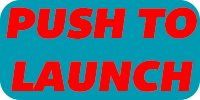
<style>
.page{position:relative;width:200px;height:100px;background:#009bb2}
.page>*{position:absolute;margin:0}
.t1{font:44px "BemioItalic";color:#fa0200}
</style>
<div class="page">
<p class="t1" style="left:6px;top:7px;width:191px;height:85px;text-align:center">PUSH TO<br>LAUNCH</p>
</div>
